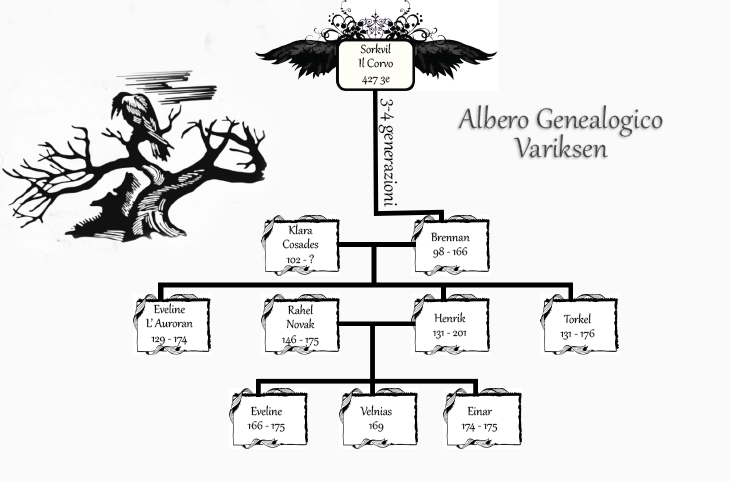
<style>
.page{position:relative;width:730px;height:482px;background:#fafafa}
.page>*{position:absolute;margin:0}
.t1{font:14.4px/14.4px "Gabriola";color:#000000}
.t2{font:23.1px "Gabriola";color:#000000}
.t3{font:34.6px/14.4px "Gabriola";color:#4e4e4e}
.t4{font:14.4px/14.4px "Gabriola"}
</style>
<div class="page">
<p class="t1" style="left:358px;top:43px;width:35px;height:42px;text-align:center">Sorkvil<br>Il Corvo<br>427 3e</p>
<p class="t2" style="left:378px;top:98px;width:20px;height:109px;rotate:90deg">3-4 generazioni</p>
<p class="t3" style="left:458px;top:105px;width:205px;height:53px;text-align:center">Albero Genealogico<br><br>Variksen</p>
<p class="t1" style="left:282px;top:224px;width:37px;height:40px;text-align:center">Klara<br>Cosades<br>102 - ?</p>
<p class="t1" style="left:431px;top:232px;width:39px;height:26px;text-align:center">Brennan<br>98 - 166</p>
<p class="t1" style="left:146px;top:303px;width:47px;height:42px;text-align:center">Eveline<br>L’ Auroran<br>129 - 174</p>
<p class="t1" style="left:281px;top:304px;width:38px;height:42px;text-align:center">Rahel<br>Novak<br>146 - 175</p>
<p class="t4" style="left:432px;top:312px;width:34px;height:27px;text-align:center">Henrik<br>131 - 201</p>
<p class="t1" style="left:560px;top:313px;width:35px;height:27px;text-align:center">Torkel<br>131 - 176</p>
<p class="t1" style="left:247px;top:405px;width:38px;height:27px;text-align:center">Eveline<br>166 - 175</p>
<p class="t1" style="left:360px;top:405px;width:32px;height:27px;text-align:center">Velnias<br>169</p>
<p class="t1" style="left:461px;top:406px;width:37px;height:26px;text-align:center">Einar<br>174 - 175</p>
</div>
